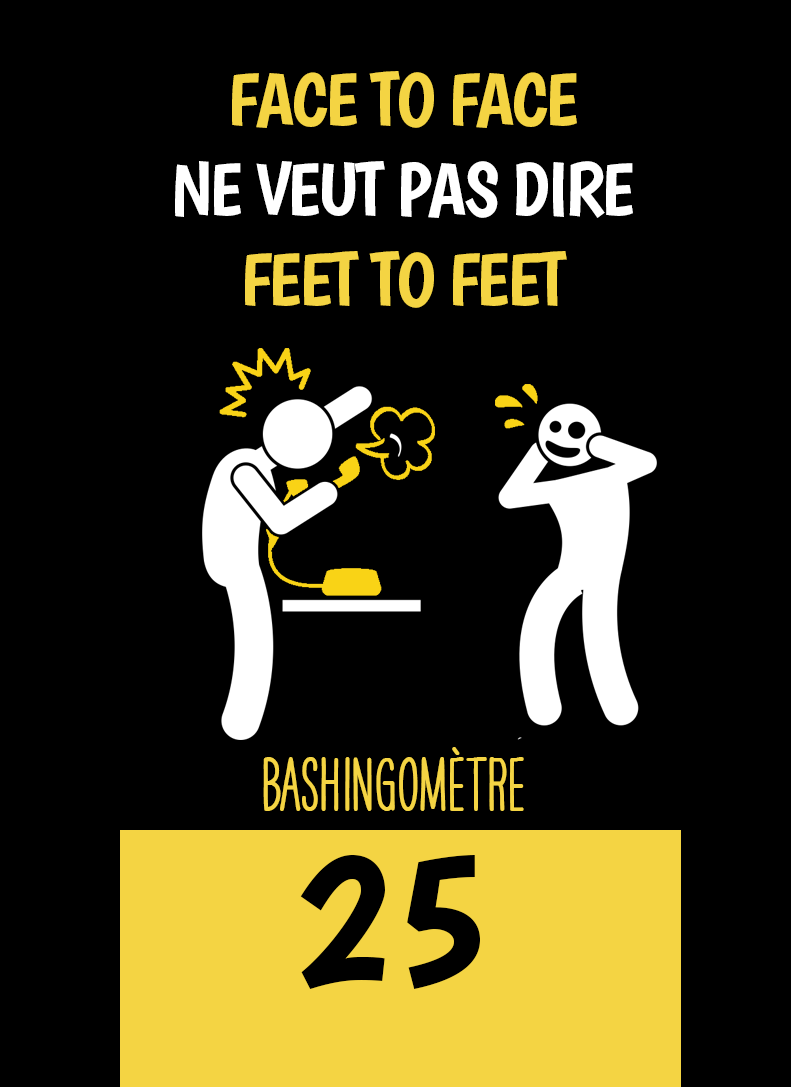
<style>
.page{position:relative;width:791px;height:1087px;background:#000000}
.page>*{position:absolute;margin:0}
.t1{font:75px "Boogaloo-Regular";letter-spacing:-0.04em;color:#ffffff}
.t2{font:75px "Boogaloo-Regular";letter-spacing:-0.04em;color:#f4d443}
.t3{font:66.7px "HAVEANICEDAYTallW04-Bold";color:#f4d443}
.t4{font:200px "Boogaloo-Regular";color:#000000}
</style>
<div class="page">
<p class="t1" style="left:175px;top:71px;width:458px;height:237px;text-align:center"><span class="t2">FACE TO FACE<br></span>NE VEUT PAS DIRE <span class="t2">FEET TO FEET</span></p>
<p class="t3" style="left:263px;top:747px;width:261px;height:64px">BASHINgomètre</p>
<p class="t4" style="left:300px;top:855px;width:180px;height:134px">25</p>
</div>
